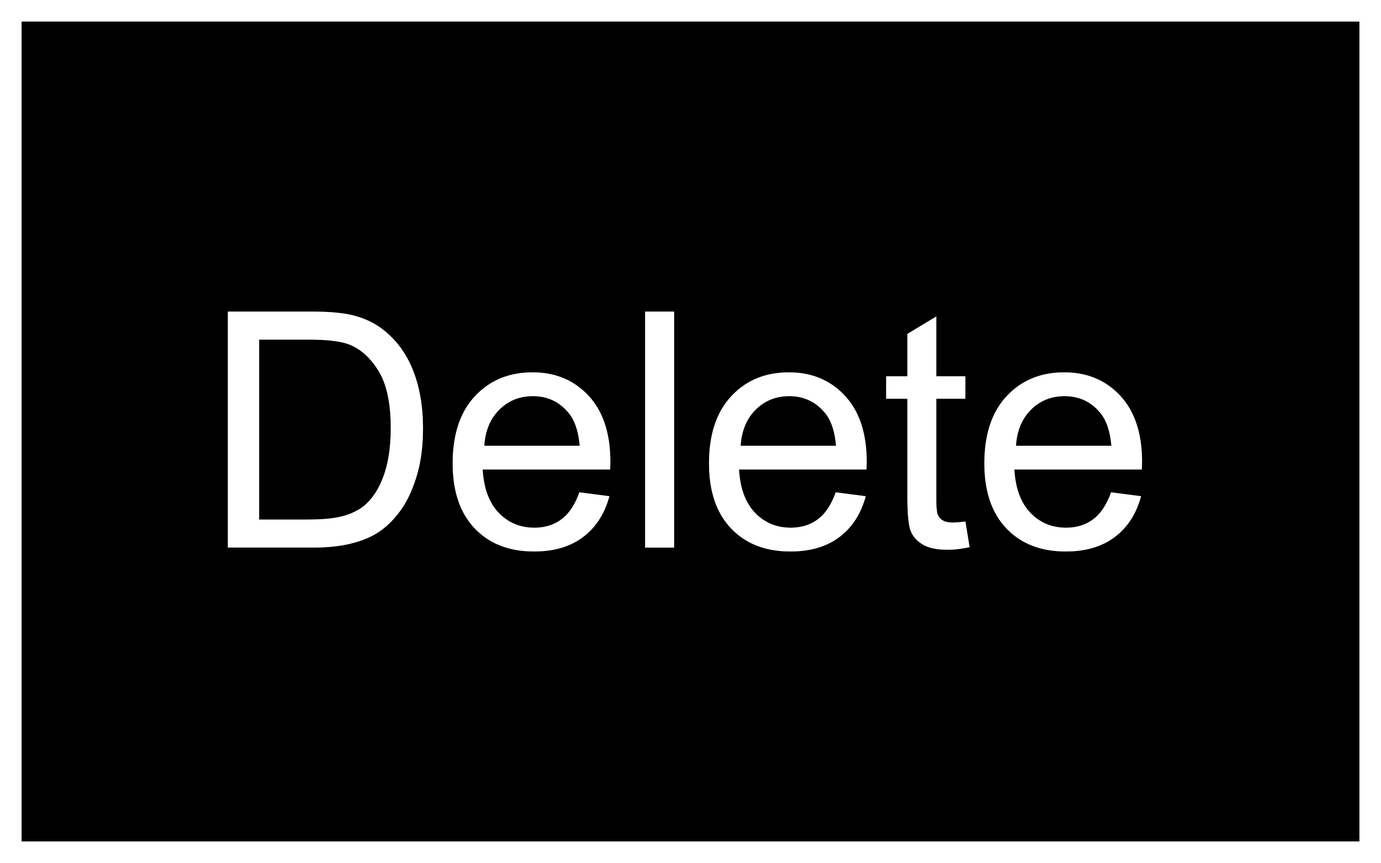
<style>
.page{position:relative;width:1381px;height:863px;background:#000000}
.page>*{position:absolute;margin:0}
.t1{font:329.7px "ArialMT";color:#ffffff}
</style>
<div class="page">
<p class="t1" style="left:227px;top:312px;width:916px;height:240px">Delete</p>
</div>
